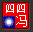
<style>
.page{position:relative;width:33px;height:32px;background:#f20000}
.page>*{position:absolute;margin:0}
.t1{font:10.4px "SimSun";color:#ffffff}
.t2{font:11.7px "SimSun";color:#ffffff}
</style>
<div class="page">
<p class="t1" style="left:6px;top:4px;width:19px;height:9px">四四</p>
<p class="t2" style="left:16px;top:15px;width:11px;height:12px">冯</p>
</div>
